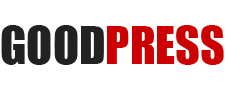
<style>
.page{position:relative;width:240px;height:90px;background:#ffffff}
.page>*{position:absolute;margin:0}
.t1{font:48px "Impact";color:#cc0000}
.t2{font:48px "Impact";color:#222222}
</style>
<div class="page">
<p class="t1" style="left:1px;top:25px;width:223px;height:40px"><span class="t2">GOOD</span>PRESS</p>
</div>
